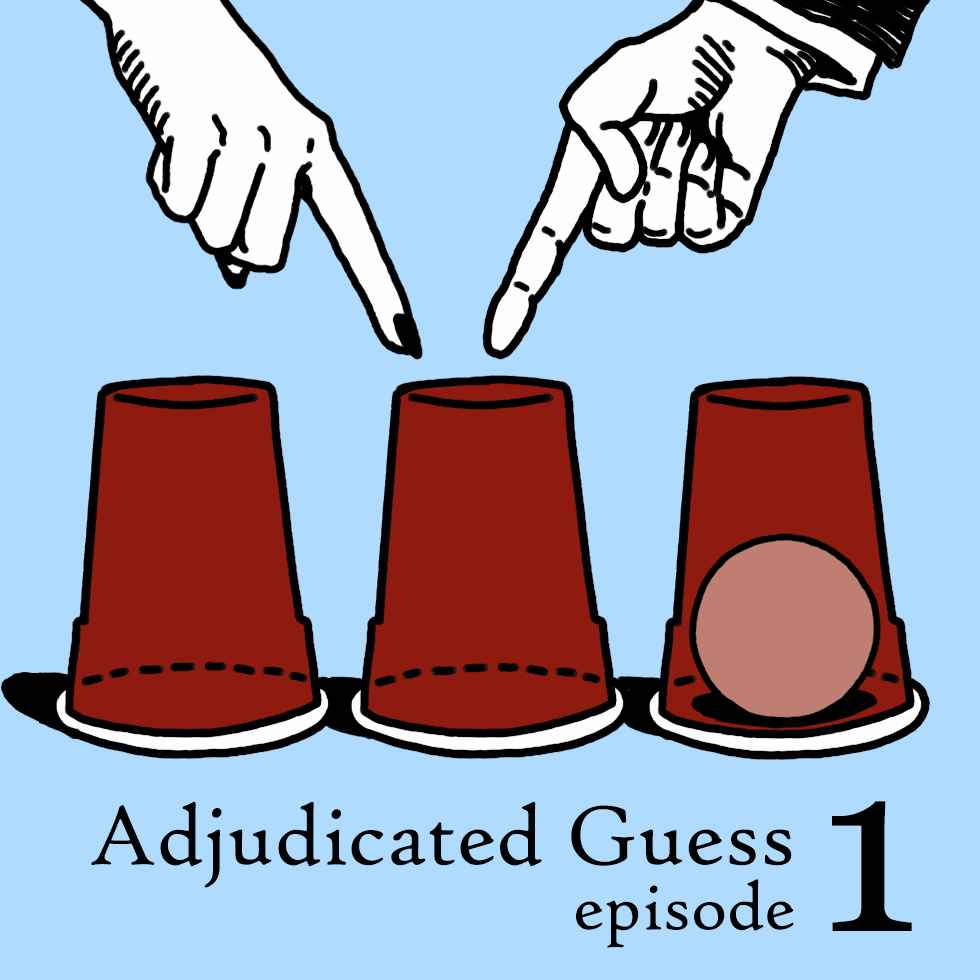
<style>
.page{position:relative;width:980px;height:980px;background:#aedbfe}
.page>*{position:absolute;margin:0}
.t1{font:90px "HighTowerText-Reg";color:#000000}
.t2{font:240px "Georgia";color:#000000}
.t3{font:72px "HighTowerText-Reg";color:#000000}
</style>
<div class="page">
<p class="t1" style="left:91px;top:801px;width:701px;height:87px">Adjudicated Guess</p>
<p class="t2" style="left:832px;top:801px;width:80px;height:130px">1</p>
<p class="t3" style="left:576px;top:879px;width:218px;height:69px">episode</p>
</div>
